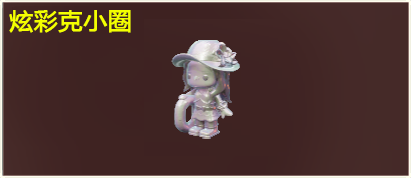
<style>
.page{position:relative;width:411px;height:178px}
.page>*{position:absolute;margin:0}
.t1{font:24px "MicrosoftYaHeiUI";color:#f4ff00;font-weight:bold}
</style>
<div class="page">
<p class="t1" style="left:9px;top:10px;width:122px;height:23px">炫彩克小圈</p>
</div>
